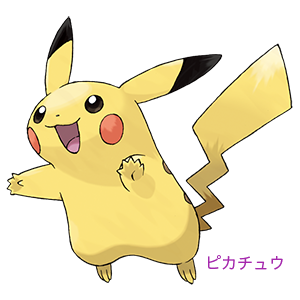
<style>
.page{position:relative;width:300px;height:300px;background:#ffffff}
.page>*{position:absolute;margin:0}
.t1{font:16px "HiraKakuProN-W3";color:#a529ad}
</style>
<div class="page">
<p class="t1" style="left:208px;top:255px;width:75px;height:15px">ピカチュウ</p>
</div>
